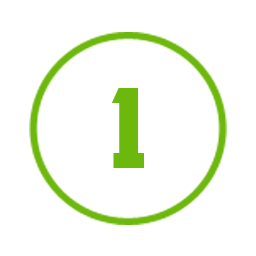
<style>
.page{position:relative;width:256px;height:256px;background:#ffffff}
.page>*{position:absolute;margin:0}
.t1{font:110.3px "AmericanCaptain";color:#6db80c;scale:1.12 1}
</style>
<div class="page">
<p class="t1" style="left:112px;top:88px;width:32px;height:80px">1</p>
</div>
